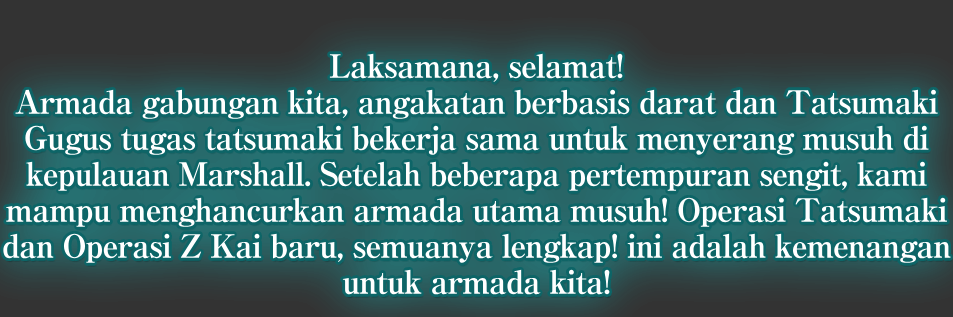
<style>
.page{position:relative;width:953px;height:317px}
.page>*{position:absolute;margin:0}
.t1{font:32px/36px "RyuminPro-ExBold";letter-spacing:-0.04em;color:#ffffff}
</style>
<div class="page">
<p class="t1" style="left:3px;top:53px;width:948px;height:242px;text-align:center">Laksamana, selamat!<br>Armada gabungan kita, angakatan berbasis darat dan Tatsumaki<br>Gugus tugas tatsumaki bekerja sama untuk menyerang musuh di<br>kepulauan Marshall. Setelah beberapa pertempuran sengit, kami<br>mampu menghancurkan armada utama musuh! Operasi Tatsumaki<br>dan Operasi Z Kai baru, semuanya lengkap! ini adalah kemenangan<br>untuk armada kita!</p>
</div>
